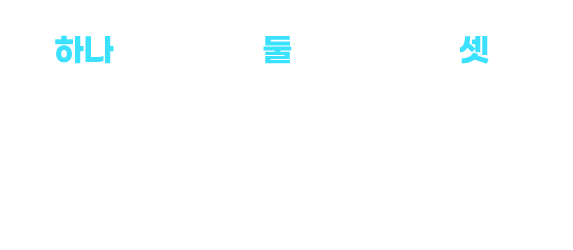
<style>
.page{position:relative;width:573px;height:250px;background:#ffffff}
.page>*{position:absolute;margin:0}
.t1{font:32.2px "GmarketSansBold";letter-spacing:-0.025em;color:#3be1ff}
</style>
<div class="page">
<p class="t1" style="left:55px;top:35px;width:59px;height:29px">하나</p>
<p class="t1" style="left:263px;top:36px;width:29px;height:28px">둘</p>
<p class="t1" style="left:460px;top:36px;width:29px;height:28px">셋</p>
</div>
